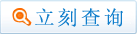
<style>
.page{position:relative;width:137px;height:34px;background:#ffffff}
.page>*{position:absolute;margin:0}
.t1{font:20px "SimSun";letter-spacing:0.16em;color:#0f7dcb}
</style>
<div class="page">
<p class="t1" style="left:35px;top:8px;width:88px;height:19px">立刻查询</p>
</div>
